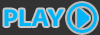
<style>
.page{position:relative;width:100px;height:35px;background:#333333}
.page>*{position:absolute;margin:0}
.t1{font:23.4px "FedraSans-Bold";color:#00b5f8}
</style>
<div class="page">
<p class="t1" style="left:4px;top:9px;width:60px;height:17px">PLAY</p>
</div>
